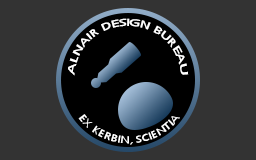
<style>
.page{position:relative;width:256px;height:160px;background:#333333}
.page>*{position:absolute;margin:0}
.t1{font:9px "SegoeUI";color:#ffffff}
.t2{font:10px "SegoeUI-Light";color:#ffffff}
</style>
<div class="page">
<p class="t1" style="left:68px;top:18px;width:121px;height:58px;text-align:center">ALNAIR DESIGN BUREAU</p>
<p class="t2" style="left:78px;top:114px;width:102px;height:31px;text-align:center">EX KERBIN, SCIENTIA</p>
</div>
